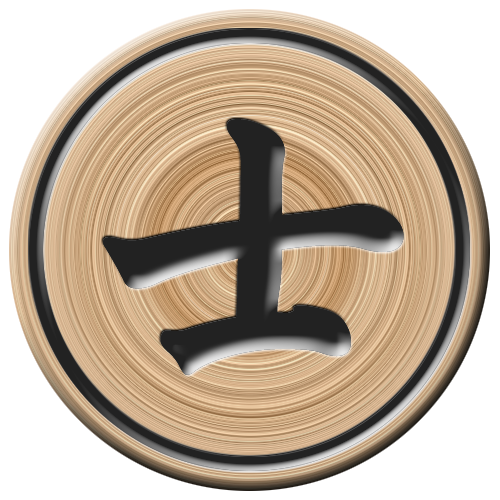
<style>
.page{position:relative;width:500px;height:500px;background:#ffffff}
.page>*{position:absolute;margin:0}
.t1{font:360px "STXingkai";color:#222222}
</style>
<div class="page">
<p class="t1" style="left:103px;top:119px;width:301px;height:256px">士</p>
</div>
